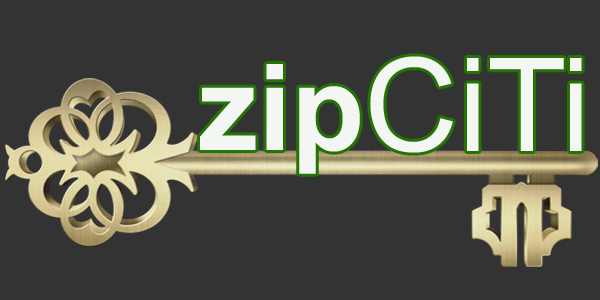
<style>
.page{position:relative;width:600px;height:300px;background:#333333}
.page>*{position:absolute;margin:0}
.t1{font:120px "Arial-BoldMT";color:#f4f6f4}
.t2{font:130px "ArialMT";color:#f4f6f4}
</style>
<div class="page">
<p class="t1" style="left:200px;top:64px;width:160px;height:110px">zip</p>
<p class="t2" style="left:370px;top:56px;width:212px;height:97px">CiTi</p>
</div>
